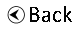
<style>
.page{position:relative;width:80px;height:29px;background:#ffffff}
.page>*{position:absolute;margin:0}
.t1{font:23.6px "Calibri";color:#050505}
</style>
<div class="page">
<p class="t1" style="left:30px;top:6px;width:42px;height:16px">Back</p>
</div>
